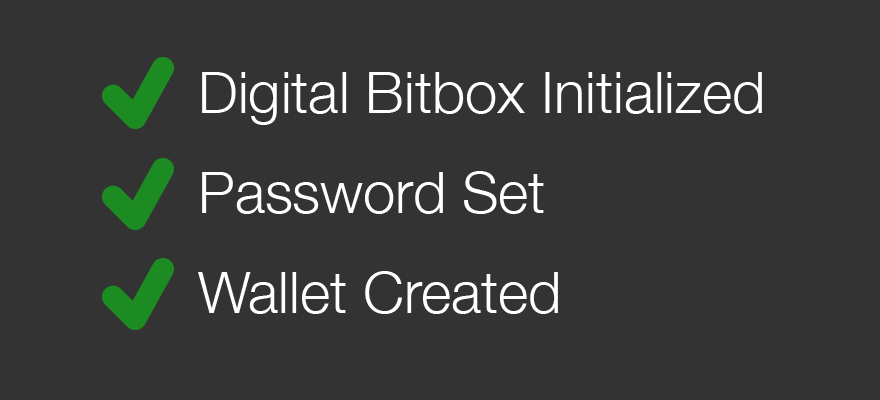
<style>
.page{position:relative;width:880px;height:400px;background:#333333}
.page>*{position:absolute;margin:0}
.t1{font:57.9px/100px "HelveticaNeue-Light";color:#ffffff}
</style>
<div class="page">
<p class="t1" style="left:198px;top:72px;width:564px;height:242px">Digital Bitbox Initialized<br>Password Set<br>Wallet Created</p>
</div>
